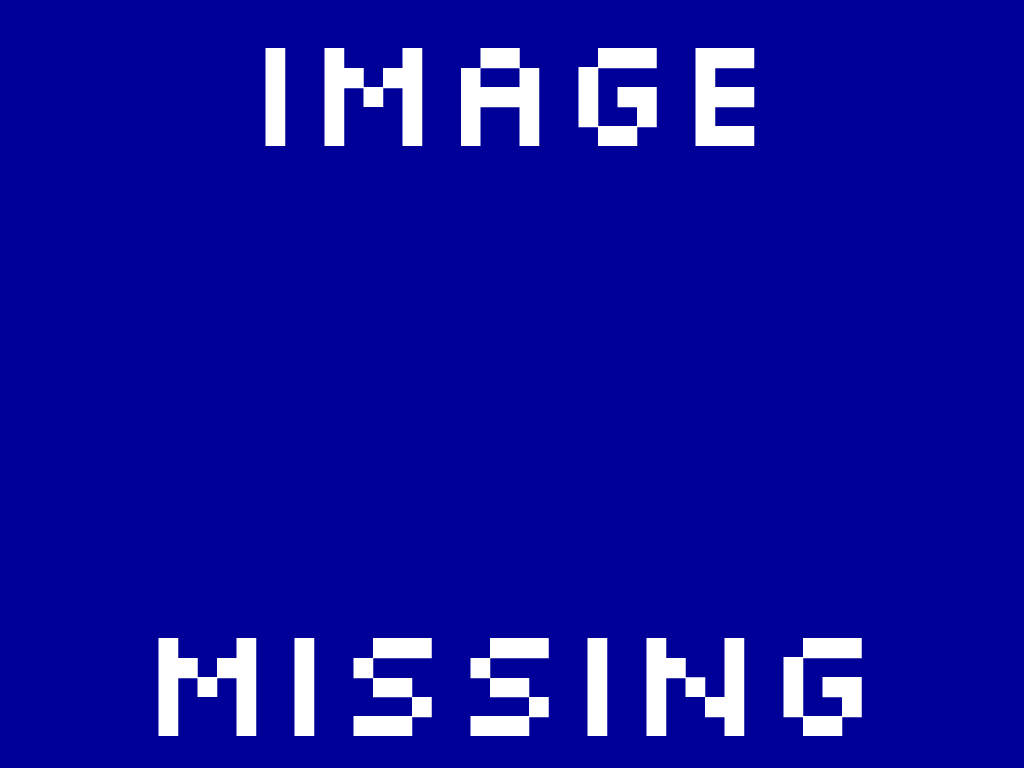
<style>
.page{position:relative;width:1024px;height:768px;background:#000098}
.page>*{position:absolute;margin:0}
.t1{font:164px "Silkscreen";color:#ffffff}
</style>
<div class="page">
<p class="t1" style="left:158px;top:48px;width:704px;height:688px;text-align:center">image<br><br><br>Missing</p>
</div>
